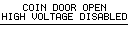
<style>
.page{position:relative;width:128px;height:32px;background:#ffffff}
.page>*{position:absolute;margin:0}
.t1{font:10px "Terminal";color:#000000}
</style>
<div class="page">
<p class="t1" style="left:23px;top:4px;width:83px;height:7px">COIN DOOR OPEN</p>
<p class="t1" style="left:2px;top:13px;width:125px;height:7px">HIGH VOLTAGE DISABLED</p>
</div>
